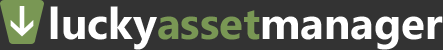
<style>
.page{position:relative;width:443px;height:50px;background:#333333}
.page>*{position:absolute;margin:0}
.t1{font:44px "SegoeUI-Bold";color:#ffffff}
.t2{font:44px "SegoeUI-Bold";color:#799754}
</style>
<div class="page">
<p class="t1" style="left:50px;top:6px;width:393px;height:44px">lucky<span class="t2">asset</span>manager</p>
</div>
